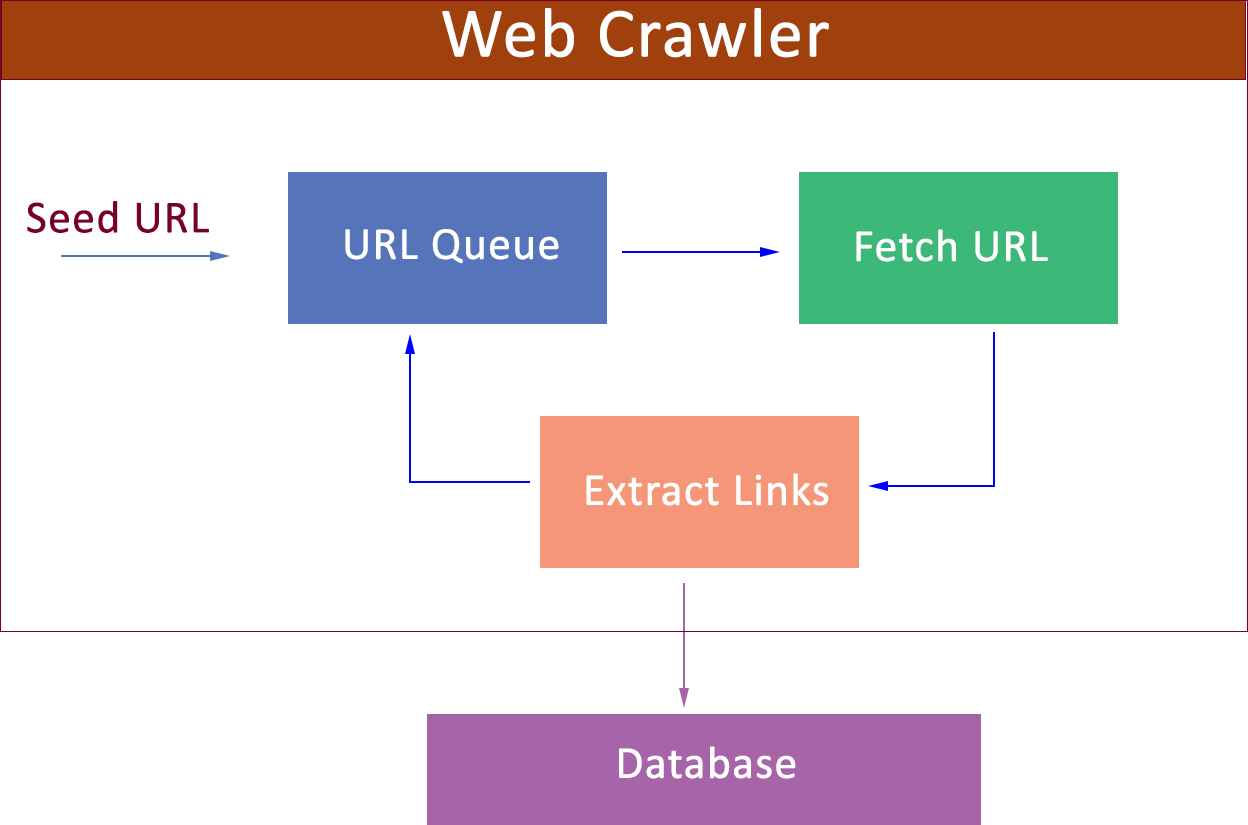
<style>
.page{position:relative;width:1248px;height:825px;background:#ffffff}
.page>*{position:absolute;margin:0}
.t1{font:70.8px "Calibri";color:#ffffff;font-weight:bold}
.t2{font:45.8px "Calibri";color:#7a0026;font-weight:bold}
.t3{font:45.8px "Calibri";color:#ffffff;font-weight:bold}
</style>
<div class="page">
<p class="t1" style="left:442px;top:8px;width:387px;height:50px">Web Crawler</p>
<p class="t2" style="left:27px;top:201px;width:182px;height:32px">Seed URL</p>
<p class="t3" style="left:345px;top:229px;width:214px;height:35px">URL Queue</p>
<p class="t3" style="left:856px;top:229px;width:192px;height:33px">Fetch URL</p>
<p class="t3" style="left:586px;top:473px;width:243px;height:33px">Extract Links</p>
<p class="t3" style="left:619px;top:746px;width:177px;height:33px">Database</p>
</div>
